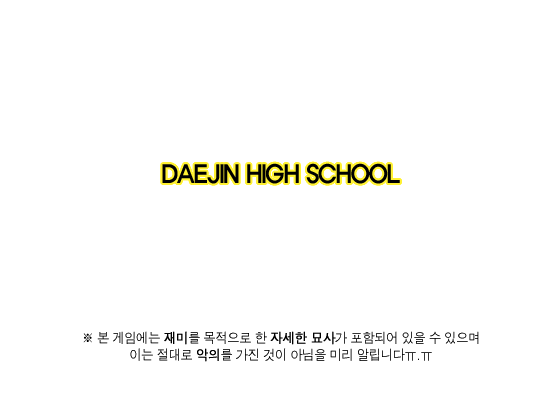
<style>
.page{position:relative;width:550px;height:400px;background:#ffffff}
.page>*{position:absolute;margin:0}
.t1{font:24px "ExpoM-HM";letter-spacing:-0.05em;color:#000000;scale:0.9 1}
.t2{font:14px "Dotum";letter-spacing:-0.05em;color:#000000;scale:0.9 1}
.t3{font:14px "Dotum";letter-spacing:-0.05em;color:#000000;font-weight:bold;scale:0.9 1}
</style>
<div class="page">
<p class="t1" style="left:162px;top:163px;width:238px;height:21px">DAEJIN HIGH SCHOOL</p>
<p class="t2" style="left:83px;top:331px;width:396px;height:31px;text-align:center">※ 본 게임에는 <span class="t3">재미</span>를 목적으로 한 <span class="t3">자세한 묘사</span>가 포함되어 있을 수 있으며<br>이는 절대로 <span class="t3">악의</span>를 가진 것이 아님을 미리 알립니다ㅠ.ㅠ</p>
</div>
